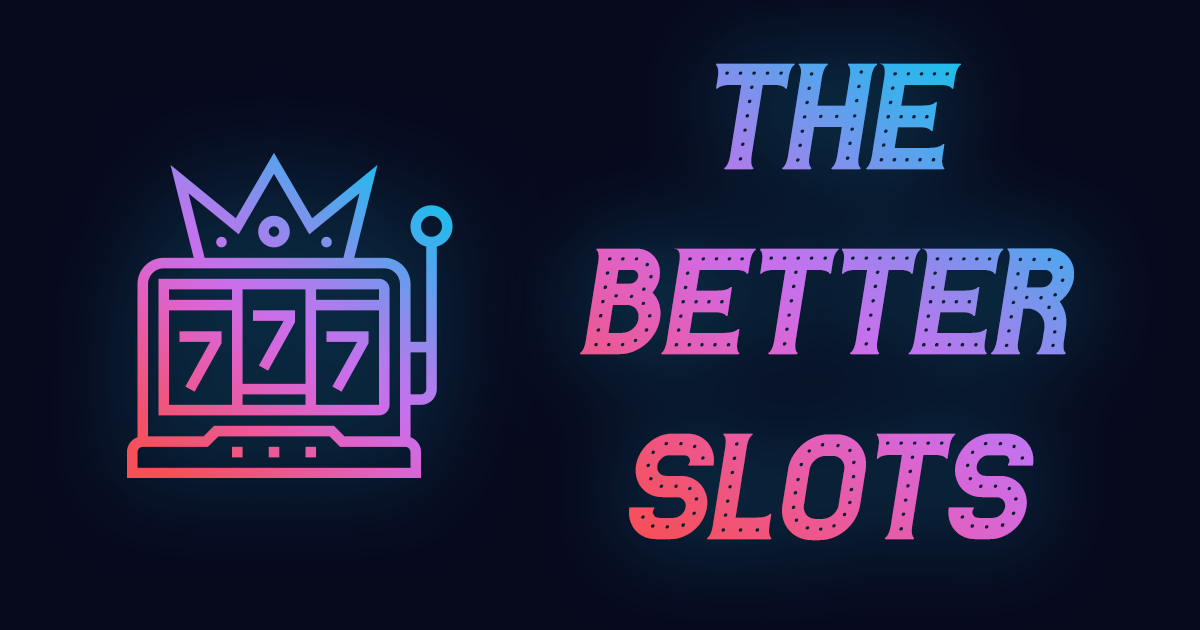
<style>
.page{position:relative;width:1200px;height:630px;background:#07091d}
.page>*{position:absolute;margin:0}
.t1{font:154.2px "Casino-Italic"}
</style>
<div class="page">
<p class="t1" style="left:580px;top:63px;width:494px;height:478px;text-align:center">The<br>Better<br>Slots</p>
</div>
